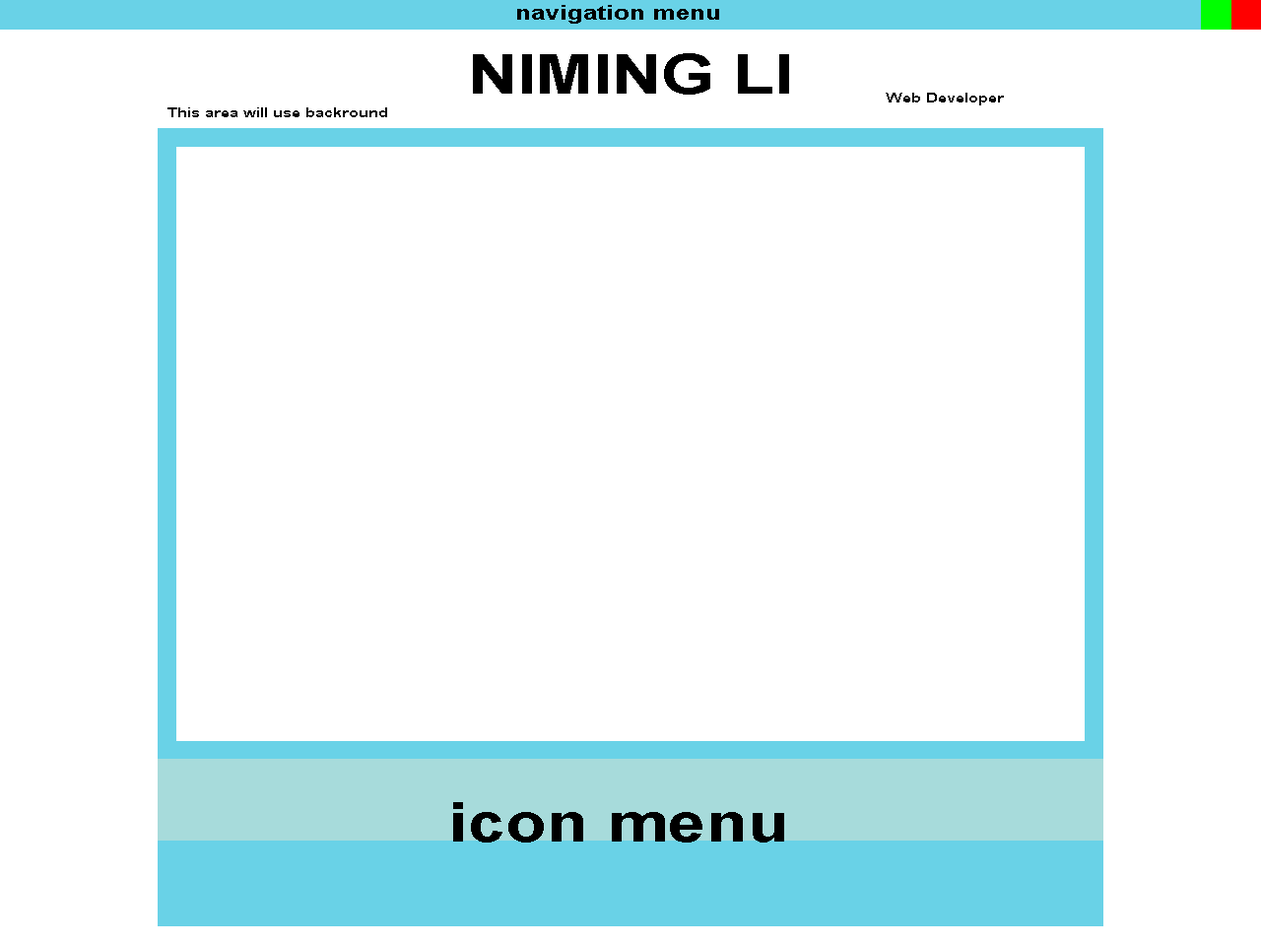
<style>
.page{position:relative;width:1261px;height:946px;background:#ffffff}
.page>*{position:absolute;margin:0}
.t1{font:20.6px "Arial-BoldMT";color:#000000;scale:1.24 1}
.t2{font:54.8px "Arial-BoldMT";color:#000000;scale:1.24 1}
.t3{font:13.7px "Arial-BoldMT";color:#000000;scale:1.24 1}
</style>
<div class="page">
<p class="t1" style="left:517px;top:5px;width:202px;height:19px">navigation menu</p>
<p class="t2" style="left:473px;top:53px;width:316px;height:42px">NIMING LI</p>
<p class="t3" style="left:886px;top:93px;width:118px;height:12px">Web Developer</p>
<p class="t3" style="left:167px;top:107px;width:220px;height:10px">This area will use backround</p>
<p class="t2" style="left:453px;top:802px;width:331px;height:40px">icon menu</p>
</div>
